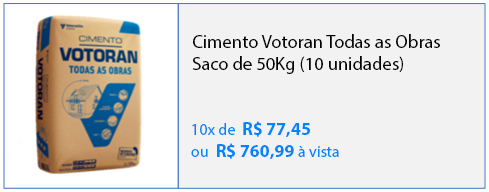
<style>
.page{position:relative;width:489px;height:192px;background:#f2f2f2}
.page>*{position:absolute;margin:0}
.t1{font:18.6px "MyriadPro-Regular";color:#000000}
.t2{font:18px "MyriadPro-Bold";color:#0084ff}
.t3{font:16px "MyriadPro-Regular";color:#0084ff}
</style>
<div class="page">
<p class="t1" style="left:192px;top:34px;width:248px;height:40px">Cimento Votoran Todas as Obras<br>Saco de 50Kg (10 unidades)</p>
<p class="t2" style="left:191px;top:121px;width:148px;height:38px"><span class="t3">10x de  </span>R$ 77,45<br><span class="t3">ou  </span>R$ 760,99 <span class="t3">à vista</span></p>
</div>
